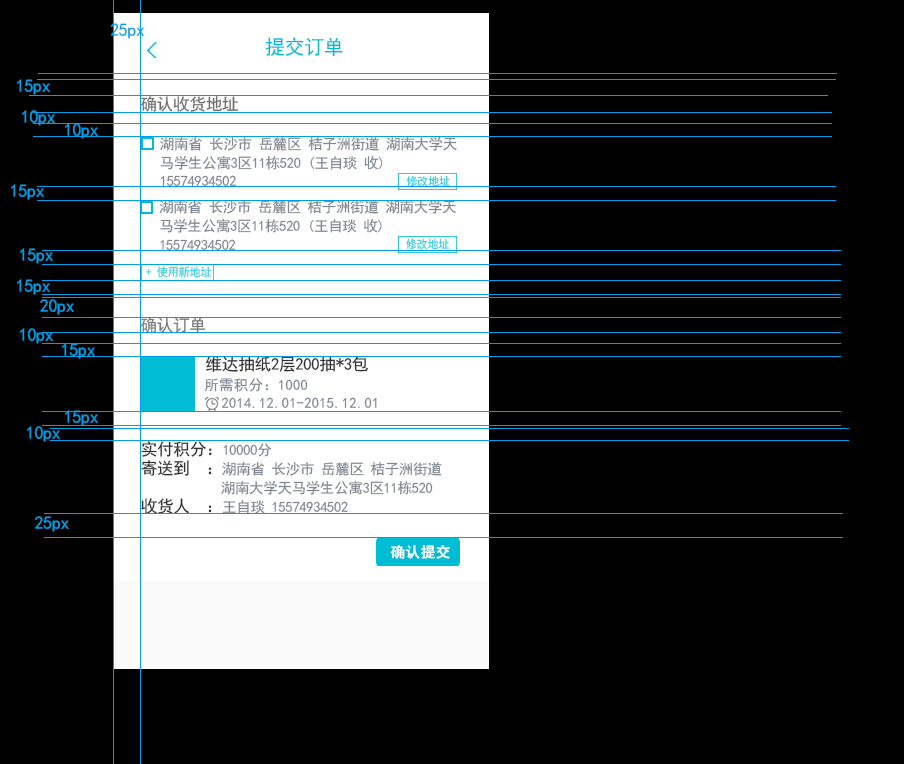
<style>
.page{position:relative;width:904px;height:764px;background:#000000}
.page>*{position:absolute;margin:0}
.t1{font:18px "SimHei";letter-spacing:-0.02em;color:#00a0e9}
.t2{font:20.1px "SimHei";letter-spacing:-0.02em;color:#00bcd4}
.t3{font:16.7px "SimHei";letter-spacing:-0.02em;color:#6e6e6e}
.t4{font:14.5px/18.9px "SimHei";letter-spacing:-0.02em;color:#808792}
.t5{font:11.1px "SimHei";letter-spacing:-0.02em;color:#3cccde}
.t6{font:16.7px "SimHei";letter-spacing:-0.02em;color:#7a7a7a}
.t7{font:16.7px "SimHei";letter-spacing:-0.02em;color:#2e3031}
.t8{font:14.5px "SimHei";letter-spacing:0.02em;color:#808792}
.t9{font:16.7px/18.9px "SimHei";letter-spacing:-0.02em;color:#2e3031}
.t10{font:14.5px "SimHei";letter-spacing:0.02em;color:#ffffff;font-weight:bold}
</style>
<div class="page">
<p class="t1" style="left:110px;top:23px;width:35px;height:16px">25px</p>
<p class="t2" style="left:265px;top:37px;width:78px;height:20px">提交订单</p>
<p class="t1" style="left:17px;top:79px;width:33px;height:16px">15px</p>
<p class="t3" style="left:140px;top:96px;width:99px;height:16px">确认收货地址</p>
<p class="t1" style="left:22px;top:110px;width:33px;height:16px">10px</p>
<p class="t1" style="left:65px;top:123px;width:33px;height:16px">10px</p>
<p class="t4" style="left:160px;top:136px;width:297px;height:50px">湖南省 长沙市 岳麓区 桔子洲街道 湖南大学天马学生公寓3区11栋520 (王自琰 收) 15574934502</p>
<p class="t1" style="left:11px;top:184px;width:33px;height:16px">15px</p>
<p class="t5" style="left:406px;top:175px;width:44px;height:12px">修改地址</p>
<p class="t4" style="left:159px;top:199px;width:297px;height:51px">湖南省 长沙市 岳麓区 桔子洲街道 湖南大学天马学生公寓3区11栋520 (王自琰 收) 15574934502</p>
<p class="t5" style="left:406px;top:238px;width:44px;height:12px">修改地址</p>
<p class="t1" style="left:20px;top:248px;width:33px;height:16px">15px</p>
<p class="t5" style="left:146px;top:266px;width:66px;height:12px">+ 使用新地址</p>
<p class="t1" style="left:17px;top:279px;width:33px;height:16px">15px</p>
<p class="t1" style="left:40px;top:299px;width:34px;height:16px">20px</p>
<p class="t6" style="left:140px;top:317px;width:66px;height:16px">确认订单</p>
<p class="t1" style="left:20px;top:328px;width:33px;height:16px">10px</p>
<p class="t1" style="left:62px;top:343px;width:33px;height:16px">15px</p>
<p class="t7" style="left:206px;top:356px;width:162px;height:16px">维达抽纸2层200抽*3包</p>
<p class="t8" style="left:205px;top:378px;width:103px;height:14px">所需积分：1000</p>
<p class="t8" style="left:221px;top:397px;width:156px;height:11px">2014.12.01-2015.12.01</p>
<p class="t1" style="left:65px;top:410px;width:33px;height:16px">15px</p>
<p class="t1" style="left:27px;top:426px;width:33px;height:16px">10px</p>
<p class="t4" style="left:141px;top:441px;width:301px;height:73px"><span class="t9">实付积分：</span>10000分<br><span class="t9">寄送到  ：</span>湖南省 长沙市 岳麓区 桔子洲街道          湖南大学天马学生公寓3区11栋520<br><span class="t9">收货人  ：</span>王自琰 15574934502</p>
<p class="t1" style="left:35px;top:516px;width:34px;height:16px">25px</p>
<p class="t10" style="left:390px;top:545px;width:60px;height:14px">确认提交</p>
</div>
